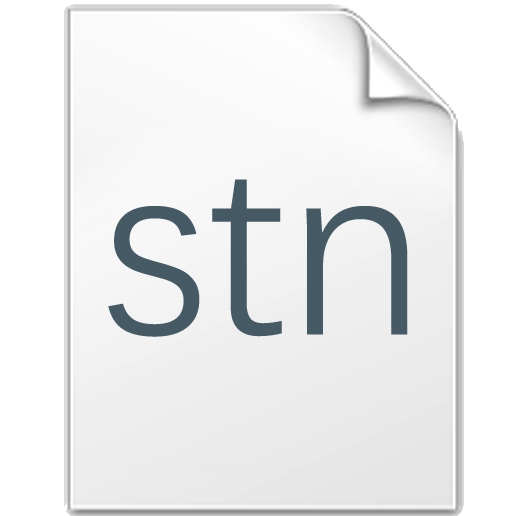
<style>
.page{position:relative;width:516px;height:516px;background:#ffffff}
.page>*{position:absolute;margin:0}
.t1{font:252.7px "DengXian-Regular";color:#455a64}
</style>
<div class="page">
<p class="t1" style="left:108px;top:179px;width:300px;height:158px">stn</p>
</div>
